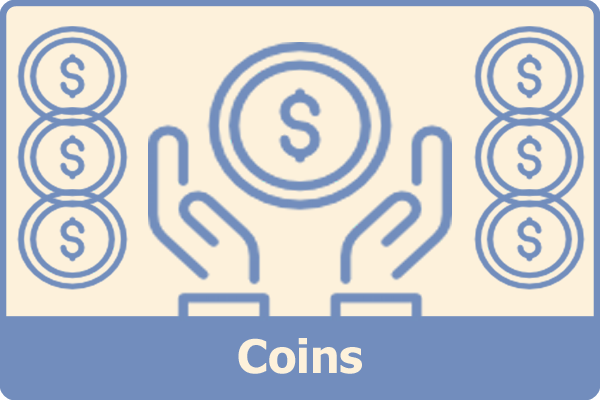
<style>
.page{position:relative;width:600px;height:400px;background:#fdf1db}
.page>*{position:absolute;margin:0}
.t1{font:46.1px "Tahoma-Bold";color:#fef2dc}
</style>
<div class="page">
<p class="t1" style="left:238px;top:338px;width:124px;height:36px">Coins</p>
</div>
